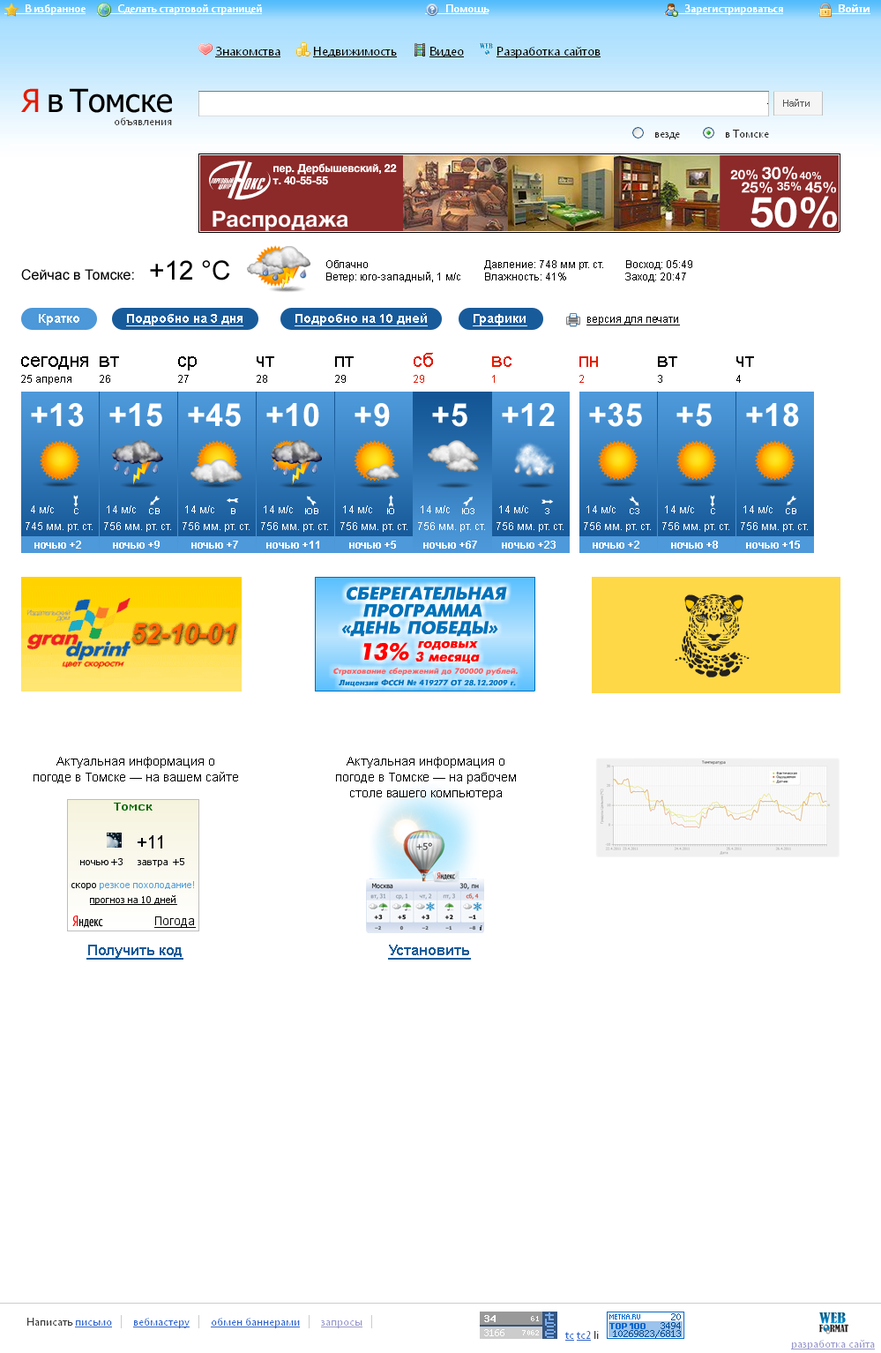
<style>
.page{position:relative;width:881px;height:1353px;background:#ffffff}
.page>*{position:absolute;margin:0}
.t1{font:14.1px "ArialMT";color:#000000}
.t2{font:26.5px "ArialMT";color:#000000}
.t3{font:10.6px "ArialMT";color:#000000}
.t4{font:12.3px "Arial-BoldMT";color:#feffff}
.t5{font:12.3px "Arial-BoldMT";color:#feffff;text-decoration:underline}
.t6{font:10.6px "ArialMT";color:#000000;text-decoration:underline}
.t7{font:19.4px/15.9px "ArialMT";color:#e31b00}
.t8{font:10.6px/15.9px "ArialMT";color:#e31b00}
.t9{font:10.6px/15.9px "ArialMT";color:#000000}
.t10{font:19.4px/15.9px "ArialMT";color:#000000}
.t11{font:31.8px "Arial-BoldMT";color:#feffff}
.t12{font:10.6px "ArialMT";color:#feffff}
.t13{font:10.6px "Arial-BoldMT";color:#feffff}
.t14{font:12.3px/15.9px "ArialMT";color:#000000}
.t15{font:14.1px "Arial-BoldMT";color:#185b9a;text-decoration:underline}
</style>
<div class="page">
<p class="t1" style="left:21px;top:269px;width:113px;height:12px">Сейчас в Томске:</p>
<p class="t2" style="left:150px;top:260px;width:80px;height:21px">+12 °C</p>
<p class="t3" style="left:326px;top:260px;width:134px;height:22px">Облачно<br>Ветер: юго-западный, 1 м/с</p>
<p class="t3" style="left:484px;top:260px;width:119px;height:21px">Давление: 748 мм рт. ст.<br>Влажность: 41%</p>
<p class="t3" style="left:625px;top:260px;width:67px;height:22px">Восход: 05:49<br>Заход: 20:47</p>
<p class="t4" style="left:39px;top:314px;width:40px;height:11px">Кратко</p>
<p class="t5" style="left:126px;top:314px;width:117px;height:12px">Подробно на 3 дня</p>
<p class="t5" style="left:295px;top:313px;width:133px;height:13px">Подробно на 10 дней</p>
<p class="t5" style="left:473px;top:314px;width:55px;height:12px">Графики</p>
<p class="t6" style="left:587px;top:317px;width:93px;height:8px">версия для печати</p>
<p class="t7" style="left:414px;top:353px;width:19px;height:30px">сб<br><span class="t8">29</span></p>
<p class="t9" style="left:21px;top:356px;width:67px;height:29px"><span class="t10">сегодня<br></span>25 апреля</p>
<p class="t10" style="left:100px;top:356px;width:19px;height:27px">вт<br><span class="t9">26</span></p>
<p class="t10" style="left:178px;top:356px;width:19px;height:27px">ср<br><span class="t9">27</span></p>
<p class="t10" style="left:257px;top:356px;width:17px;height:27px">чт<br><span class="t9">28</span></p>
<p class="t10" style="left:335px;top:356px;width:19px;height:27px">пт<br><span class="t9">29</span></p>
<p class="t7" style="left:492px;top:356px;width:20px;height:27px">вс<br><span class="t8">1</span></p>
<p class="t7" style="left:580px;top:356px;width:18px;height:27px">пн<br><span class="t8">2</span></p>
<p class="t10" style="left:658px;top:356px;width:19px;height:27px">вт<br><span class="t9">3</span></p>
<p class="t10" style="left:737px;top:356px;width:17px;height:27px">чт<br><span class="t9">4</span></p>
<p class="t11" style="left:31px;top:403px;width:53px;height:24px">+13</p>
<p class="t11" style="left:109px;top:403px;width:53px;height:24px">+15</p>
<p class="t11" style="left:188px;top:403px;width:53px;height:24px">+45</p>
<p class="t11" style="left:266px;top:403px;width:53px;height:24px">+10</p>
<p class="t11" style="left:355px;top:403px;width:35px;height:24px">+9</p>
<p class="t11" style="left:432px;top:403px;width:36px;height:24px">+5</p>
<p class="t11" style="left:502px;top:403px;width:53px;height:23px">+12</p>
<p class="t11" style="left:589px;top:403px;width:53px;height:24px">+35</p>
<p class="t11" style="left:677px;top:403px;width:35px;height:24px">+5</p>
<p class="t11" style="left:746px;top:403px;width:53px;height:24px">+18</p>
<p class="t12" style="left:31px;top:505px;width:23px;height:8px">4 м/с</p>
<p class="t12" style="left:107px;top:505px;width:29px;height:8px">14 м/с</p>
<p class="t12" style="left:185px;top:505px;width:29px;height:8px">14 м/с</p>
<p class="t12" style="left:264px;top:505px;width:29px;height:8px">14 м/с</p>
<p class="t12" style="left:343px;top:505px;width:29px;height:8px">14 м/с</p>
<p class="t12" style="left:421px;top:505px;width:29px;height:8px">14 м/с</p>
<p class="t12" style="left:499px;top:505px;width:29px;height:8px">14 м/с</p>
<p class="t12" style="left:587px;top:505px;width:29px;height:8px">14 м/с</p>
<p class="t12" style="left:665px;top:505px;width:29px;height:8px">14 м/с</p>
<p class="t12" style="left:744px;top:505px;width:29px;height:8px">14 м/с</p>
<p class="t12" style="left:26px;top:522px;width:67px;height:10px">745 мм. рт. ст.</p>
<p class="t12" style="left:104px;top:522px;width:67px;height:10px">756 мм. рт. ст.</p>
<p class="t12" style="left:183px;top:522px;width:67px;height:10px">756 мм. рт. ст.</p>
<p class="t12" style="left:261px;top:522px;width:67px;height:10px">756 мм. рт. ст.</p>
<p class="t12" style="left:340px;top:522px;width:68px;height:10px">756 мм. рт. ст.</p>
<p class="t12" style="left:418px;top:522px;width:67px;height:10px">756 мм. рт. ст.</p>
<p class="t12" style="left:497px;top:522px;width:67px;height:10px">756 мм. рт. ст.</p>
<p class="t12" style="left:584px;top:522px;width:67px;height:10px">756 мм. рт. ст.</p>
<p class="t12" style="left:662px;top:522px;width:68px;height:10px">756 мм. рт. ст.</p>
<p class="t12" style="left:741px;top:522px;width:67px;height:10px">756 мм. рт. ст.</p>
<p class="t13" style="left:34px;top:541px;width:47px;height:8px">ночью +2</p>
<p class="t13" style="left:113px;top:541px;width:47px;height:8px">ночью +9</p>
<p class="t13" style="left:191px;top:541px;width:47px;height:8px">ночью +7</p>
<p class="t13" style="left:266px;top:541px;width:53px;height:8px">ночью +11</p>
<p class="t13" style="left:349px;top:541px;width:47px;height:8px">ночью +5</p>
<p class="t13" style="left:423px;top:541px;width:54px;height:8px">ночью +67</p>
<p class="t13" style="left:502px;top:541px;width:54px;height:8px">ночью +23</p>
<p class="t13" style="left:593px;top:541px;width:47px;height:8px">ночью +2</p>
<p class="t13" style="left:671px;top:541px;width:47px;height:8px">ночью +8</p>
<p class="t13" style="left:746px;top:541px;width:54px;height:8px">ночью +15</p>
<p class="t14" style="left:34px;top:757px;width:204px;height:26px;text-align:center">Актуальная информация о<br>погоде в Томске — на вашем сайте</p>
<p class="t14" style="left:336px;top:757px;width:180px;height:43px;text-align:center">Актуальная информация о<br>погоде в Томске — на рабочем<br>столе вашего компьютера</p>
<p class="t15" style="left:86px;top:945px;width:97px;height:15px">Получить код</p>
<p class="t15" style="left:388px;top:945px;width:83px;height:15px">Установить</p>
</div>
